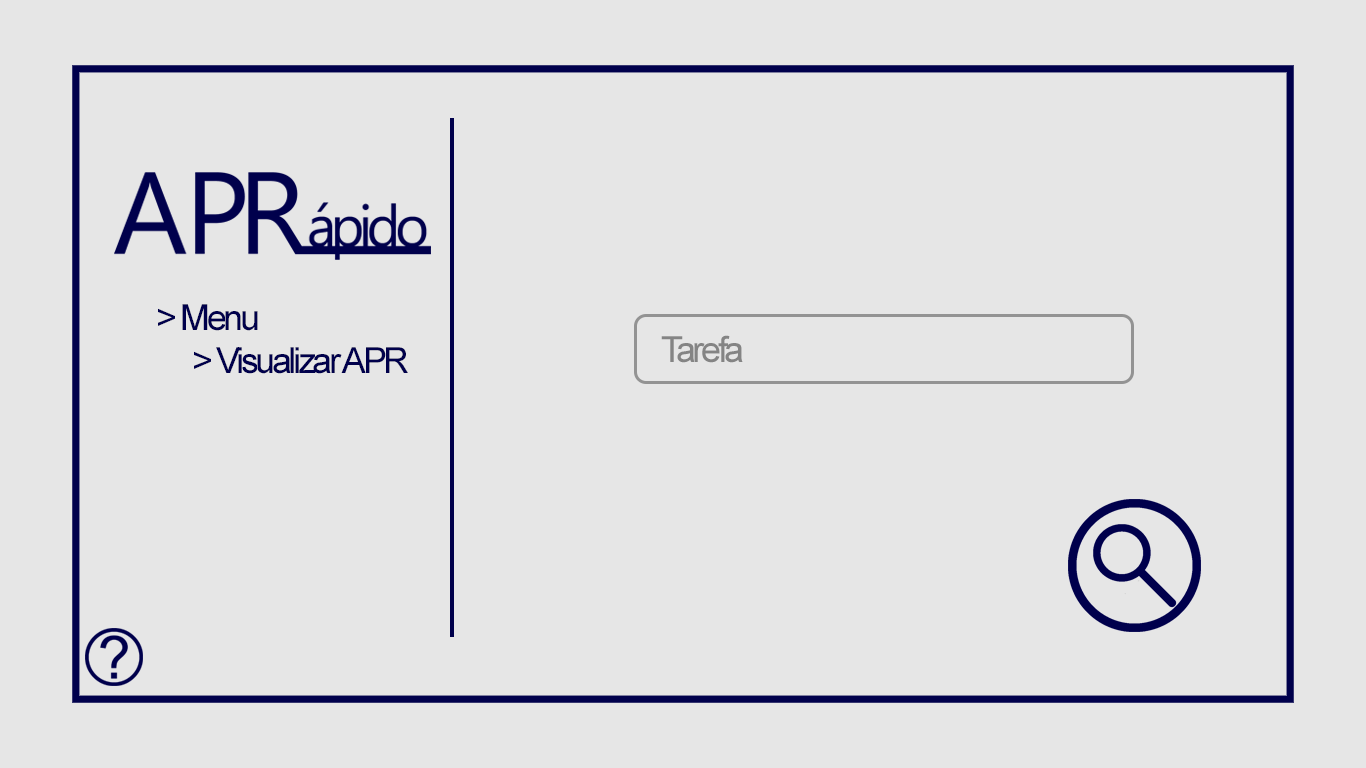
<style>
.page{position:relative;width:1366px;height:768px;background:#e6e6e6}
.page>*{position:absolute;margin:0}
.t1{font:36px "ArialMT";letter-spacing:-0.095em;color:#00004c}
.t2{font:36px "ArialMT";letter-spacing:-0.095em;color:#848484}
</style>
<div class="page">
<p class="t1" style="left:158px;top:304px;width:250px;height:70px">&gt; Menu<br> &gt; Visualizar APR</p>
<p class="t2" style="left:661px;top:335px;width:82px;height:28px">Tarefa</p>
</div>
